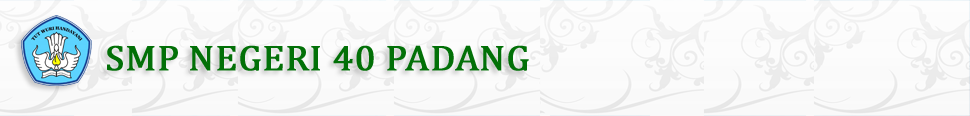
<style>
.page{position:relative;width:970px;height:116px}
.page>*{position:absolute;margin:0}
.t1{font:36px "Cambria";color:#027007;font-weight:bold;scale:1.05 1}
</style>
<div class="page">
<p class="t1" style="left:107px;top:45px;width:422px;height:26px">SMP NEGERI 40 PADANG</p>
</div>
